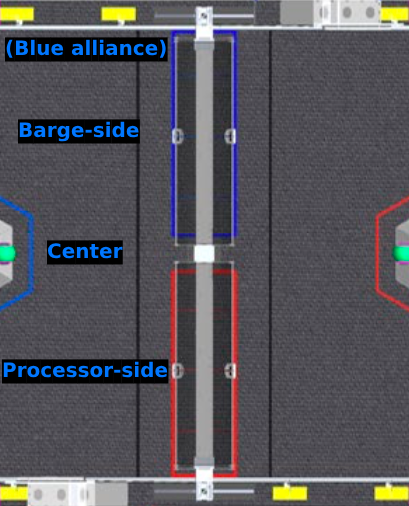
<style>
.page{position:relative;width:409px;height:506px}
.page>*{position:absolute;margin:0}
.t1{font:20px "DejaVuSans-Bold"}
</style>
<div class="page">
<p class="t1" style="left:5px;top:37px;width:163px;height:25px">(Blue alliance)</p>
<p class="t1" style="left:18px;top:119px;width:122px;height:25px">Barge-side</p>
<p class="t1" style="left:47px;top:240px;width:76px;height:25px">Center</p>
<p class="t1" style="left:2px;top:359px;width:167px;height:25px">Processor-side</p>
</div>
